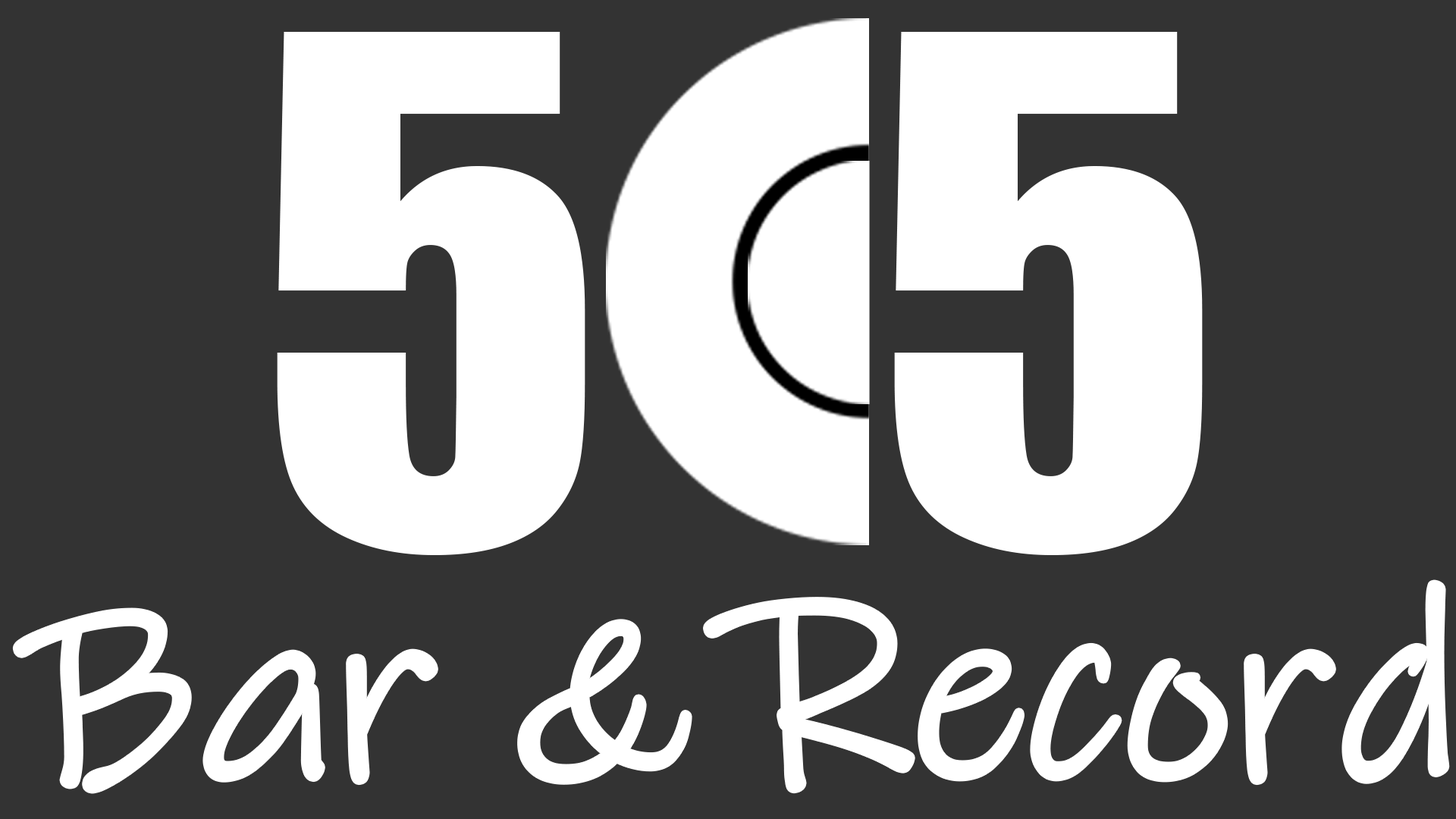
<style>
.page{position:relative;width:1456px;height:819px;background:#333333}
.page>*{position:absolute;margin:0}
.t1{font:649.9px "Impact";color:#ffffff}
.t2{font:255.1px "InkFree";color:#ffffff}
</style>
<div class="page">
<p class="t1" style="left:277px;top:32px;width:308px;height:523px">5</p>
<p class="t1" style="left:894px;top:32px;width:309px;height:523px">5</p>
<p class="t2" style="left:16px;top:583px;width:1430px;height:207px">Bar &amp; Record</p>
</div>
